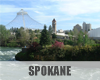
<style>
.page{position:relative;width:100px;height:80px}
.page>*{position:absolute;margin:0}
.t1{font:12px "Impact";color:#4b4b4b}
</style>
<div class="page">
<p class="t1" style="left:28px;top:65px;width:43px;height:11px">SPOKANE</p>
</div>
